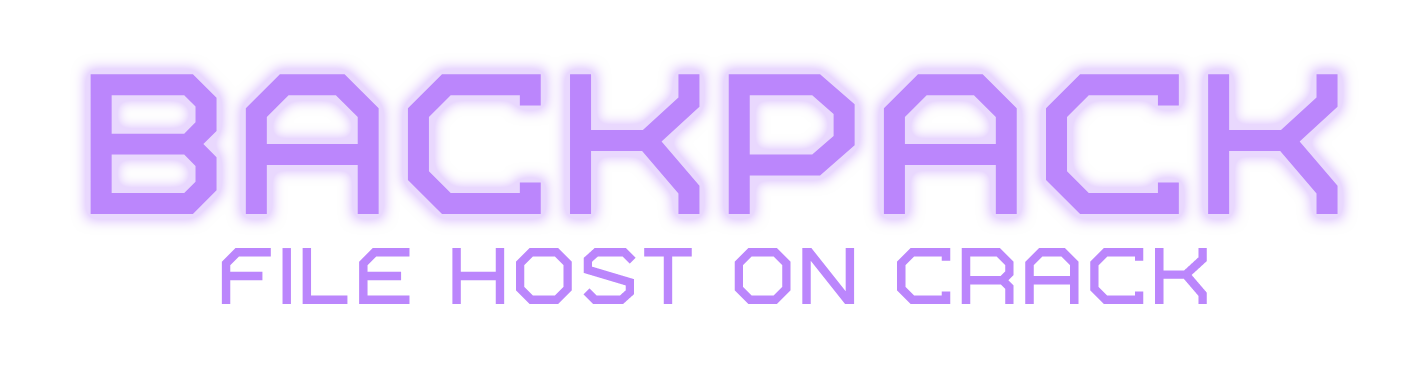
<style>
.page{position:relative;width:1428px;height:379px;background:#ffffff}
.page>*{position:absolute;margin:0}
.t1{font:200px "Bios-Bold";color:#bb86fc}
.t2{font:80px "Bios-Bold";color:#bb86fc}
</style>
<div class="page">
<p class="t1" style="left:90px;top:74px;width:1248px;height:140px">BACKPACK</p>
<p class="t2" style="left:221px;top:248px;width:986px;height:56px">File host on crack</p>
</div>
